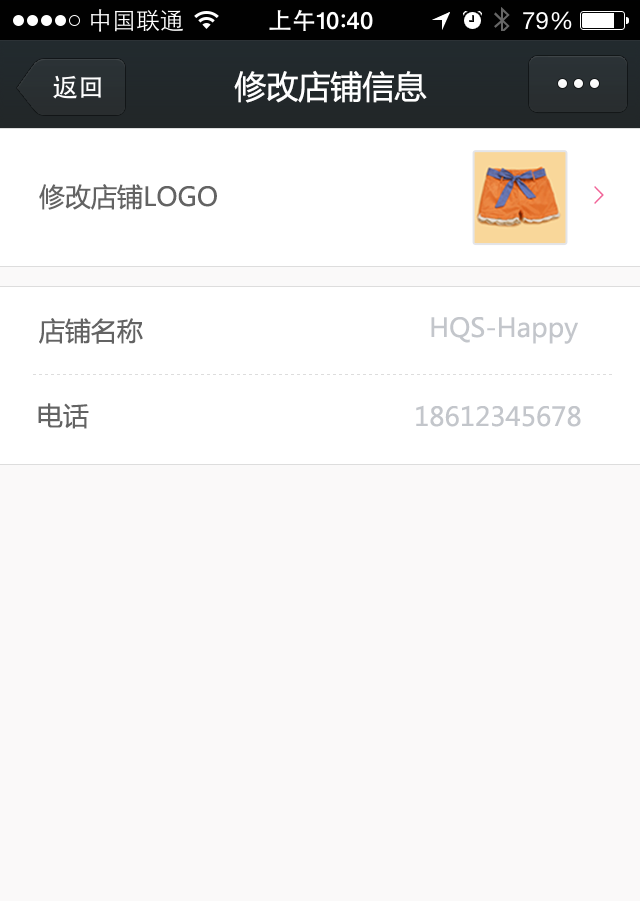
<style>
.page{position:relative;width:640px;height:901px;background:#faf9f9}
.page>*{position:absolute;margin:0}
.t1{font:32px "MicrosoftYaHei";color:#ffffff}
.t2{font:26px "MicrosoftYaHei";color:#636363}
.t3{font:26px "MicrosoftYaHei";color:#c3c6cb}
.t4{font:6px "SimSun";color:#dddddd}
</style>
<div class="page">
<p class="t1" style="left:234px;top:70px;width:193px;height:33px">修改店铺信息</p>
<p class="t2" style="left:39px;top:184px;width:178px;height:26px">修改店铺LOGO</p>
<p class="t2" style="left:39px;top:318px;width:104px;height:26px">店铺名称</p>
<p class="t3" style="left:431px;top:317px;width:147px;height:27px">HQS-Happy</p>
<p class="t4" style="left:33px;top:374px;width:579px;height:1px">- - - - - - - - - - - - - - - - - - - - - - - - - - - - - - - - - - - - - - - - - - - - - - - - - - - - - - - - - - - - - - - - - - - - - - - - - - - - - - - - - - - - - - - - - - - - - - - - -</p>
<p class="t2" style="left:38px;top:403px;width:51px;height:26px">电话</p>
<p class="t3" style="left:416px;top:405px;width:165px;height:22px">18612345678</p>
</div>
